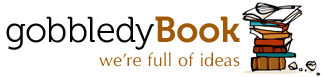
<style>
.page{position:relative;width:322px;height:77px;background:#ffffff}
.page>*{position:absolute;margin:0}
.t1{font:18px/24px "Optima-Regular";letter-spacing:0.025em;color:#9f5909}
.t2{font:36px/24px "Museo-300";color:#050505}
.t3{font:36px/24px "Museo-700";color:#9f5909}
</style>
<div class="page">
<p class="t1" style="left:6px;top:16px;width:234px;height:51px;text-align:right"><span class="t2">gobbledy</span><span class="t3">Book<br>   </span>we’re full of ideas</p>
</div>
